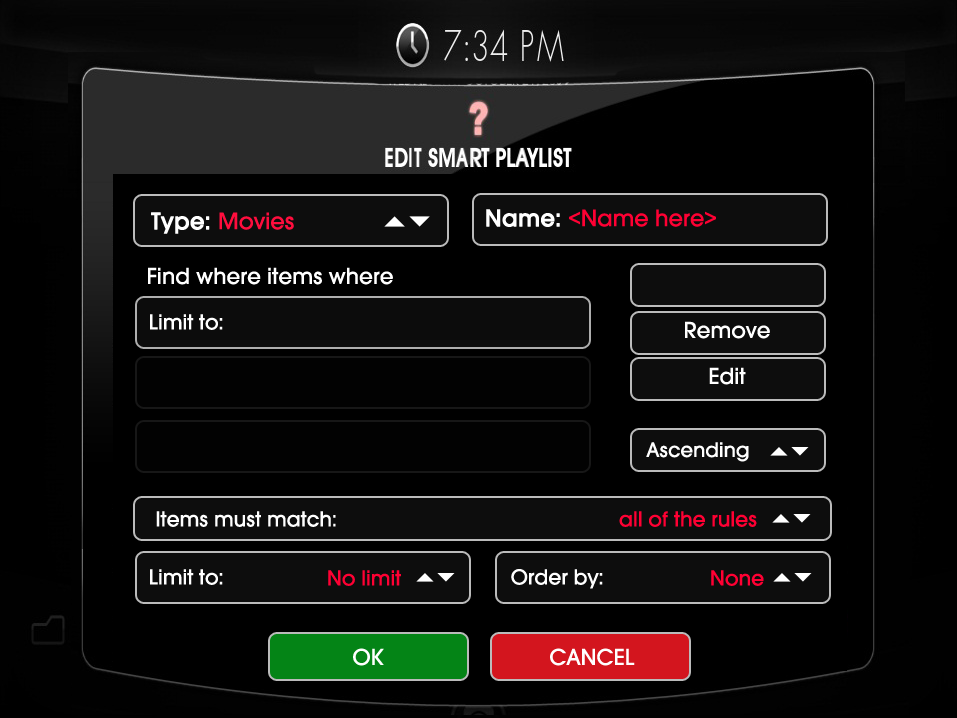
<style>
.page{position:relative;width:957px;height:718px;background:#000000}
.page>*{position:absolute;margin:0}
.t1{font:24.8px "AvantGardeMdITCTT";color:#ff0033}
.t2{font:24.8px "AvantGardeMdITCTT";color:#ffffff;font-weight:bold}
.t3{font:24px "AvantGardeMdITCTT";color:#ffffff}
.t4{font:22.6px "AvantGardeMdITCTT";color:#ffffff}
.t5{font:22px "AvantGardeMdITCTT";color:#ffffff}
.t6{font:22.6px "AvantGardeMdITCTT";color:#ff0033}
</style>
<div class="page">
<p class="t1" style="left:486px;top:209px;width:230px;height:18px"><span class="t2">Name: </span>&lt;Name here&gt;</p>
<p class="t1" style="left:151px;top:212px;width:143px;height:22px"><span class="t2">Type: </span>Movies</p>
<p class="t3" style="left:148px;top:267px;width:245px;height:18px">Find where items where</p>
<p class="t4" style="left:150px;top:314px;width:73px;height:16px">Limit to:</p>
<p class="t3" style="left:685px;top:321px;width:85px;height:18px">Remove</p>
<p class="t3" style="left:709px;top:367px;width:37px;height:18px">Edit</p>
<p class="t5" style="left:646px;top:442px;width:103px;height:20px">Ascending</p>
<p class="t4" style="left:156px;top:511px;width:180px;height:16px">Items must match:</p>
<p class="t6" style="left:619px;top:511px;width:138px;height:16px">all of the rules</p>
<p class="t4" style="left:150px;top:569px;width:73px;height:16px">Limit to:</p>
<p class="t4" style="left:511px;top:569px;width:92px;height:20px">Order by:</p>
<p class="t6" style="left:328px;top:570px;width:73px;height:16px">No limit</p>
<p class="t6" style="left:711px;top:570px;width:53px;height:16px">None</p>
<p class="t3" style="left:353px;top:648px;width:31px;height:18px">OK</p>
<p class="t3" style="left:550px;top:648px;width:85px;height:18px">CANCEL</p>
</div>
